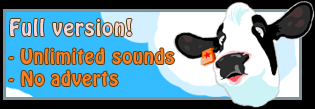
<style>
.page{position:relative;width:315px;height:109px;background:#000000}
.page>*{position:absolute;margin:0}
.t1{font:20px "HoboStd";letter-spacing:0.05em;color:#f2d6d9}
.t2{font:18px "HoboStd";letter-spacing:0.05em;color:#ff7e23}
</style>
<div class="page">
<p class="t1" style="left:10px;top:19px;width:122px;height:17px">Full version!</p>
<p class="t2" style="left:9px;top:48px;width:165px;height:38px">- Unlimited sounds<br>- No adverts</p>
</div>
